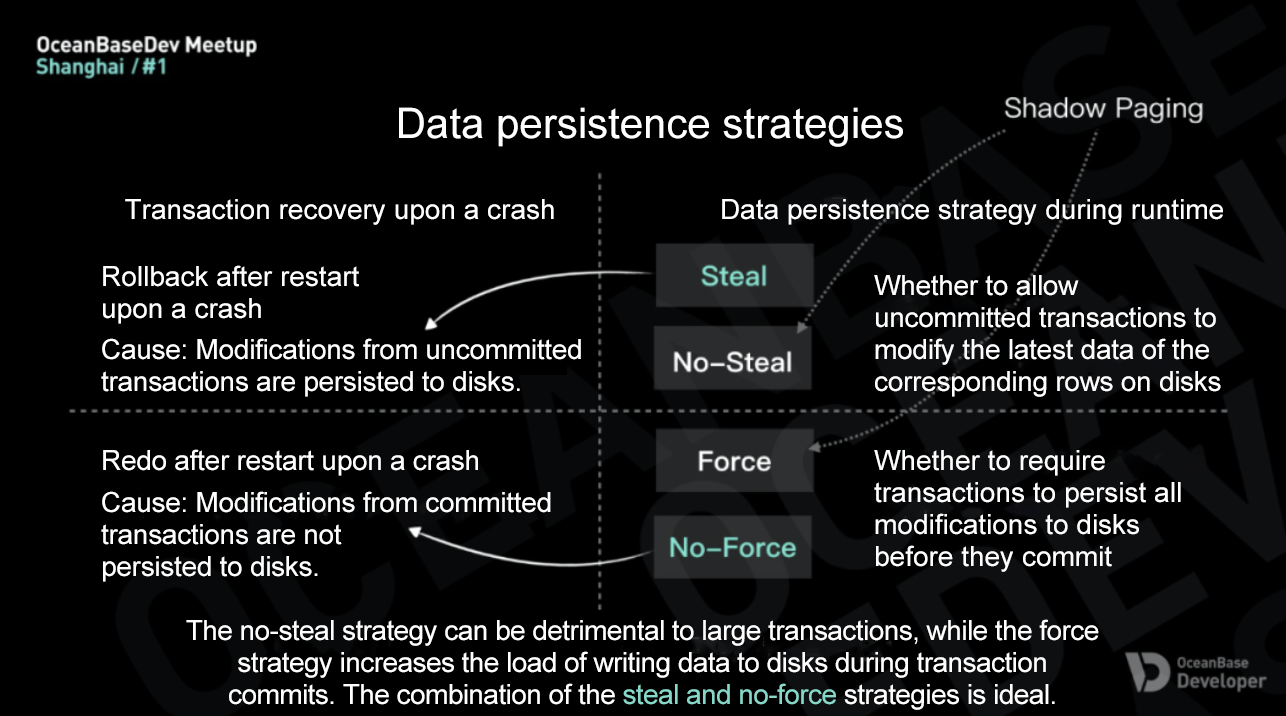
<style>
.page{position:relative;width:1286px;height:716px;background:#000001}
.page>*{position:absolute;margin:0}
.t1{font:42px "ArialMT";color:#ffffff}
.t2{font:28px "ArialMT";color:#ffffff}
.t3{font:28px/32px "ArialMT";color:#ffffff}
.t4{font:28px/32px "ArialMT";letter-spacing:-0.01em;color:#ffffff}
.t5{font:28px "ArialMT";letter-spacing:-0.01em;color:#ffffff}
.t6{font:28px/32px "ArialMT";letter-spacing:-0.02em;color:#ffffff}
.t7{font:28px/32px "ArialMT";letter-spacing:-0.02em;color:#88d8c9}
</style>
<div class="page">
<p class="t1" style="left:399px;top:107px;width:504px;height:40px">Data persistence strategies</p>
<p class="t2" style="left:125px;top:199px;width:429px;height:26px">Transaction recovery upon a crash</p>
<p class="t2" style="left:722px;top:199px;width:501px;height:26px">Data persistence strategy during runtime</p>
<p class="t3" style="left:103px;top:265px;width:256px;height:59px">Rollback after restart <br>upon a crash</p>
<p class="t4" style="left:874px;top:275px;width:347px;height:122px">Whether to allow uncommitted transactions to modify the latest data of the corresponding rows on disks</p>
<p class="t4" style="left:101px;top:338px;width:480px;height:59px">Cause: Modifications from uncommitted transactions are persisted to disks.</p>
<p class="t5" style="left:103px;top:449px;width:375px;height:27px">Redo after restart upon a crash</p>
<p class="t3" style="left:874px;top:450px;width:307px;height:122px">Whether to require transactions to persist all modifications to disks before they commit</p>
<p class="t4" style="left:101px;top:491px;width:450px;height:91px">Cause: Modifications from committed transactions are not <br>persisted to disks.</p>
<p class="t6" style="left:186px;top:619px;width:913px;height:91px;text-align:center">The no-steal strategy can be detrimental to large transactions, while the force strategy increases the load of writing data to disks during transaction commits. The combination of the <span class="t7">steal and no-force</span> strategies is ideal.</p>
</div>
